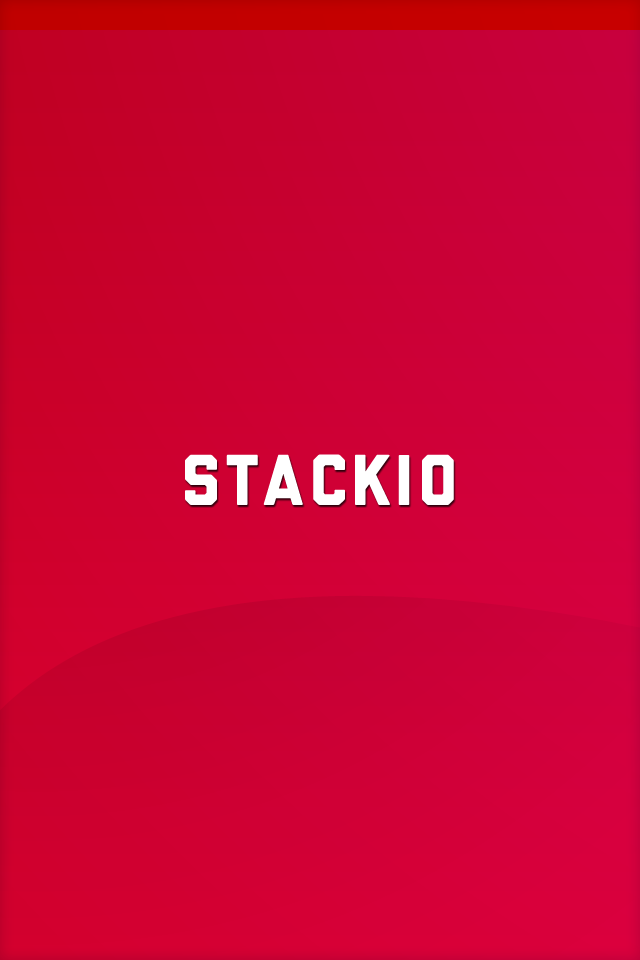
<style>
.page{position:relative;width:640px;height:960px}
.page>*{position:absolute;margin:0}
.t1{font:72px "Liberator";letter-spacing:0.05em;color:#ffffff}
</style>
<div class="page">
<p class="t1" style="left:185px;top:454px;width:269px;height:51px">Stackio</p>
</div>
